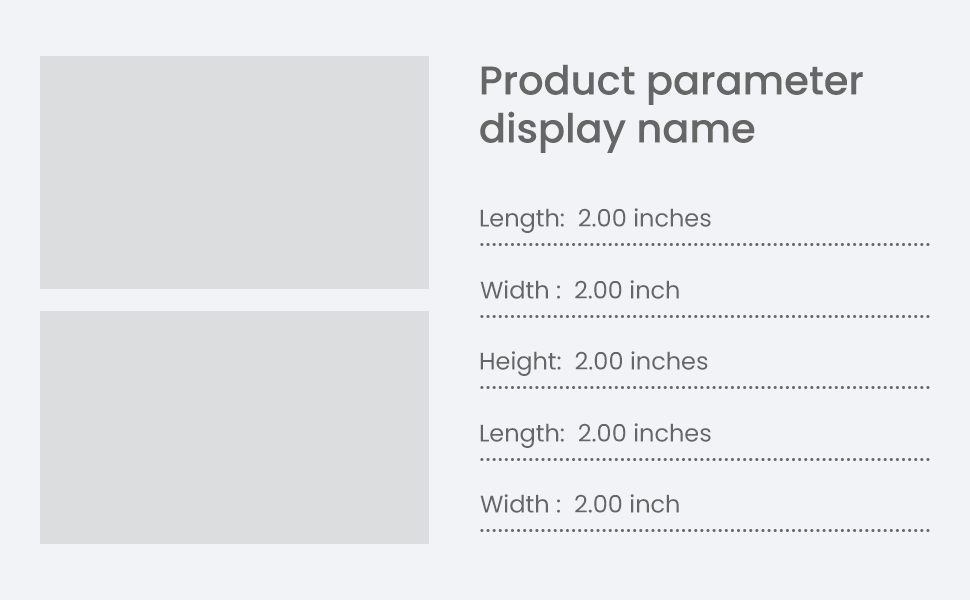
<style>
.page{position:relative;width:970px;height:600px;background:#f2f3f6}
.page>*{position:absolute;margin:0}
.t1{font:40px "Poppins-Medium";color:#666666}
.t2{font:24px "Poppins-Regular";color:#666666}
</style>
<div class="page">
<p class="t1" style="left:480px;top:64px;width:383px;height:89px">Product parameter<br>display name</p>
<p class="t2" style="left:480px;top:208px;width:231px;height:25px">Length:  2.00 inches</p>
<p class="t2" style="left:480px;top:280px;width:199px;height:19px">Width :  2.00 inch</p>
<p class="t2" style="left:480px;top:351px;width:228px;height:25px">Height:  2.00 inches</p>
<p class="t2" style="left:480px;top:423px;width:231px;height:25px">Length:  2.00 inches</p>
<p class="t2" style="left:480px;top:494px;width:199px;height:19px">Width :  2.00 inch</p>
</div>
